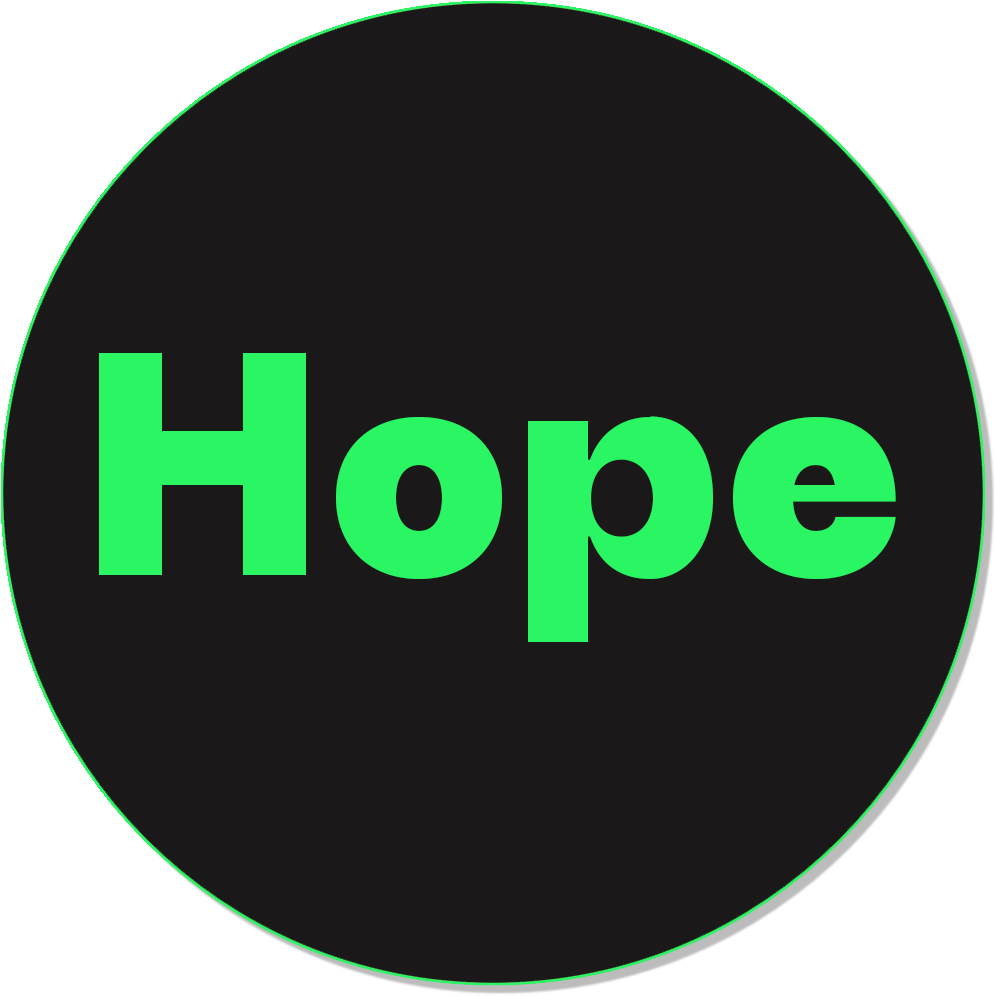
<style>
.page{position:relative;width:996px;height:996px;background:#1a1818}
.page>*{position:absolute;margin:0}
.t1{font:300px "FONTSPRINGDEMO-TGHaidoGroteskBlackRegular";color:#2af563}
</style>
<div class="page">
<p class="t1" style="left:99px;top:353px;width:797px;height:289px">Hope</p>
</div>
